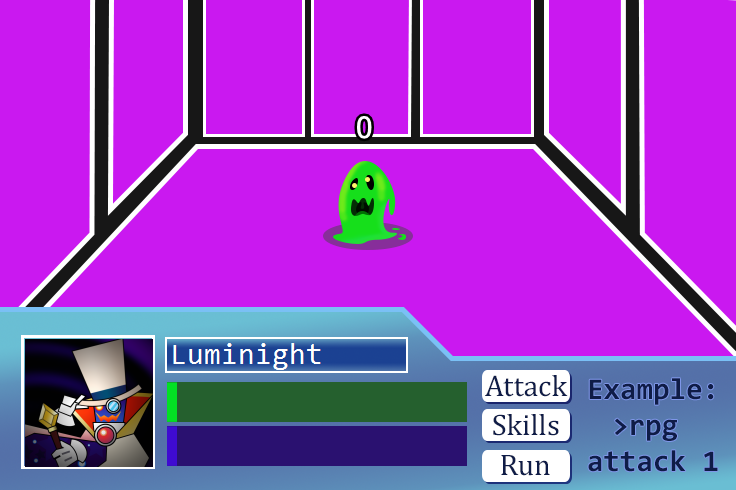
<style>
.page{position:relative;width:736px;height:490px;background:#ca18f0}
.page>*{position:absolute;margin:0}
.t1{font:30px "Cambria";color:#0f1c47}
.t2{font:30px "Consolas-Bold";color:#0f1c47}
</style>
<div class="page">
<p class="t1" style="left:485px;top:375px;width:83px;height:22px">Attack</p>
<p class="t2" style="left:588px;top:378px;width:130px;height:94px;text-align:center">Example:<br>&gt;rpg <br>attack 1</p>
<p class="t1" style="left:493px;top:414px;width:66px;height:22px">Skills</p>
<p class="t1" style="left:501px;top:455px;width:49px;height:21px">Run</p>
</div>
